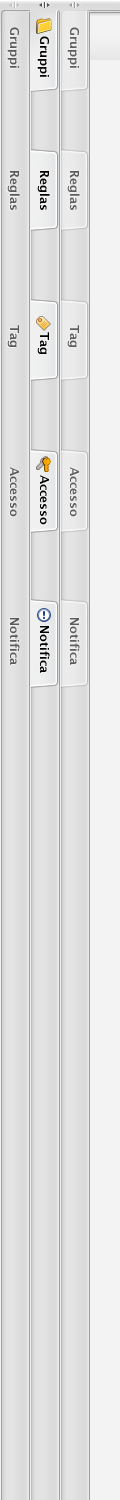
<style>
.page{position:relative;width:120px;height:1500px;background:#f3f3f3}
.page>*{position:absolute;margin:0}
.t1{font:12px "LucidaGrande-Bold";color:#5a5a5a}
.t2{font:12px "LucidaGrande-Bold";color:#5e5e5e}
.t3{font:12px "LucidaGrande-Bold";color:#000000}
</style>
<div class="page">
<p class="t1" style="left:7px;top:27px;width:12px;height:41px;rotate:90deg">Gruppi</p>
<p class="t2" style="left:67px;top:27px;width:12px;height:41px;rotate:90deg">Gruppi</p>
<p class="t3" style="left:37px;top:36px;width:12px;height:41px;rotate:90deg">Gruppi</p>
<p class="t1" style="left:7px;top:171px;width:13px;height:39px;rotate:90deg">Reglas</p>
<p class="t3" style="left:37px;top:171px;width:13px;height:39px;rotate:90deg">Reglas</p>
<p class="t2" style="left:67px;top:171px;width:13px;height:39px;rotate:90deg">Reglas</p>
<p class="t1" style="left:7px;top:325px;width:12px;height:22px;rotate:90deg">Tag</p>
<p class="t2" style="left:67px;top:325px;width:12px;height:22px;rotate:90deg">Tag</p>
<p class="t3" style="left:37px;top:332px;width:12px;height:22px;rotate:90deg">Tag</p>
<p class="t1" style="left:10px;top:467px;width:9px;height:50px;rotate:90deg">Accesso</p>
<p class="t2" style="left:70px;top:467px;width:9px;height:50px;rotate:90deg">Accesso</p>
<p class="t3" style="left:40px;top:475px;width:9px;height:50px;rotate:90deg">Accesso</p>
<p class="t1" style="left:10px;top:618px;width:10px;height:47px;rotate:90deg">Notifica</p>
<p class="t3" style="left:40px;top:626px;width:10px;height:47px;rotate:90deg">Notifica</p>
<p class="t2" style="left:70px;top:618px;width:10px;height:47px;rotate:90deg">Notifica</p>
</div>
